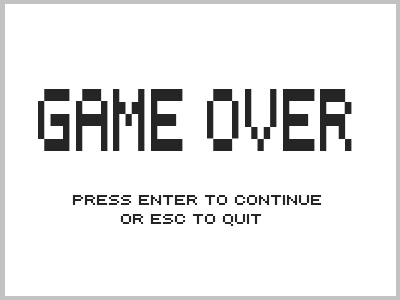
<style>
.page{position:relative;width:400px;height:300px;background:#ffffff}
.page>*{position:absolute;margin:0}
.t1{font:99.9px "automat";color:#252525;scale:0.5 1}
.t2{font:16px "automat";color:#252525}
</style>
<div class="page">
<p class="t1" style="left:38px;top:89px;width:314px;height:62px">GAME OVER</p>
<p class="t2" style="left:72px;top:195px;width:250px;height:31px">PRESS ENTER TO CONTINUE<br>        OR ESC TO QUIT</p>
</div>
